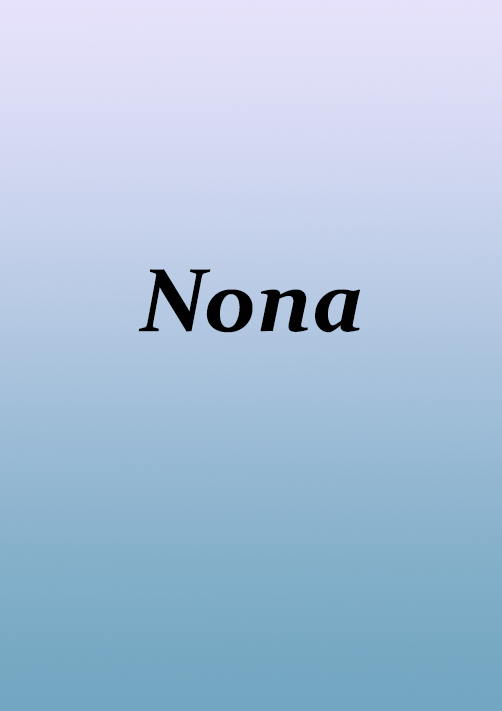
<style>
.page{position:relative;width:502px;height:711px}
.page>*{position:absolute;margin:0}
.t1{font:90px "Constantia-BoldItalic";color:#010101}
</style>
<div class="page">
<p class="t1" style="left:138px;top:269px;width:223px;height:64px">Nona</p>
</div>
